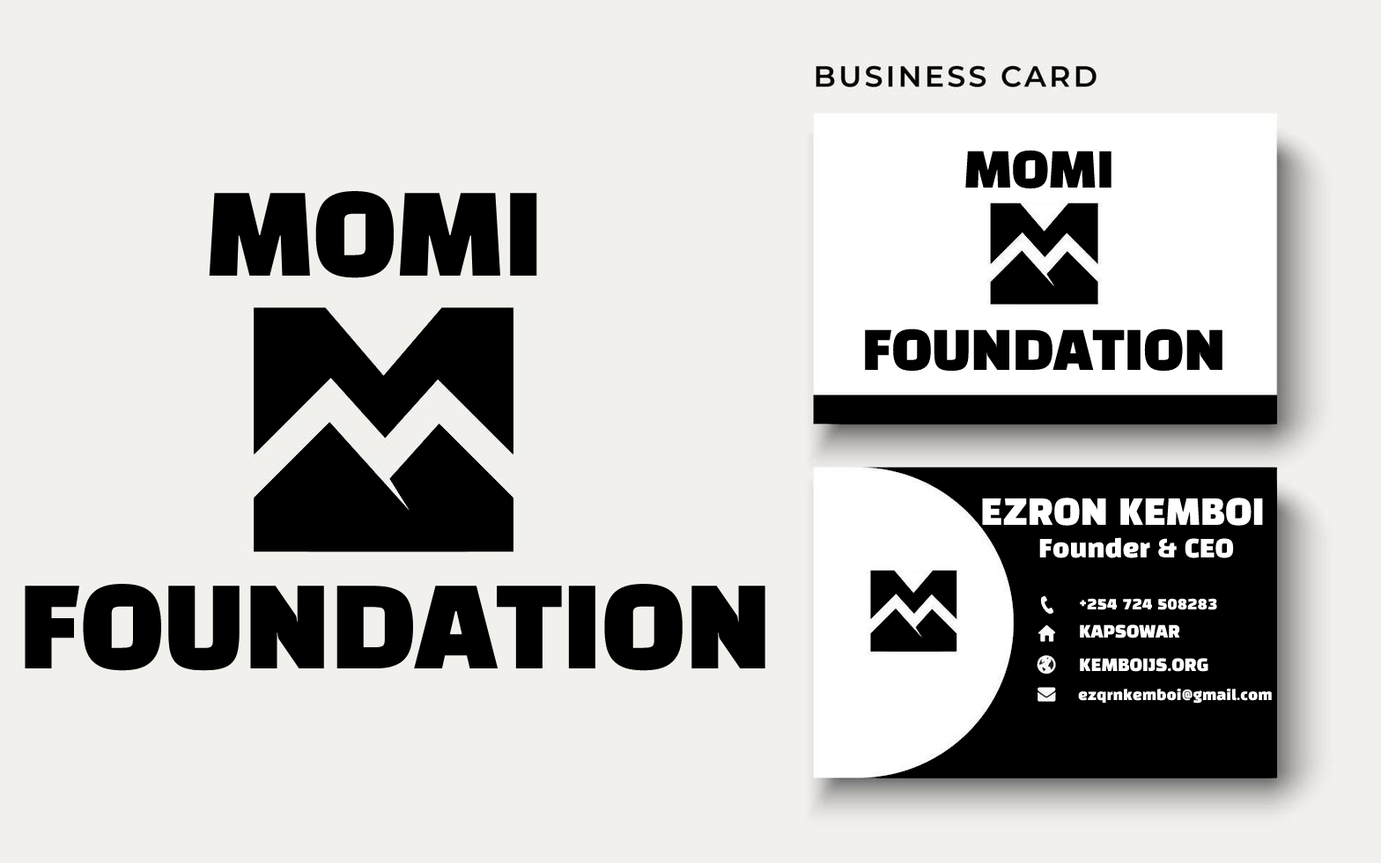
<style>
.page{position:relative;width:1381px;height:863px;background:#f1f0ec}
.page>*{position:absolute;margin:0}
.t1{font:48.4px "BlackHanSans-Regular";color:#000000}
.t2{font:110.1px "BlackHanSans-Regular";color:#000000}
.t3{font:53.2px "BlackHanSans-Regular";color:#000000}
.t4{font:35.2px "BlackHanSans-Regular";color:#ffffff}
.t5{font:24.7px "BlackHanSans-Regular";color:#ffffff}
.t6{font:16.7px "BlackHanSans-Regular";color:#ffffff}
.t7{font:14.1px "BlackHanSans-Regular";color:#ffffff}
</style>
<div class="page">
<p class="t1" style="left:965px;top:150px;width:147px;height:39px">MOMI</p>
<p class="t2" style="left:209px;top:191px;width:328px;height:87px">MOMI</p>
<p class="t3" style="left:865px;top:329px;width:358px;height:42px">FOUNDATION</p>
<p class="t4" style="left:982px;top:498px;width:281px;height:28px">EZRON KEMBOI</p>
<p class="t5" style="left:1039px;top:537px;width:195px;height:21px">Founder &amp; CEO</p>
<p class="t2" style="left:25px;top:584px;width:741px;height:87px">FOUNDATION</p>
<p class="t6" style="left:1080px;top:598px;width:137px;height:12px">+254 724 508283</p>
<p class="t6" style="left:1080px;top:625px;width:100px;height:14px">KAPSOWAR</p>
<p class="t6" style="left:1080px;top:658px;width:129px;height:14px">KEMBOIJS.ORG</p>
<p class="t7" style="left:1078px;top:689px;width:194px;height:15px">ezqrnkemboi@gmail.com</p>
</div>
